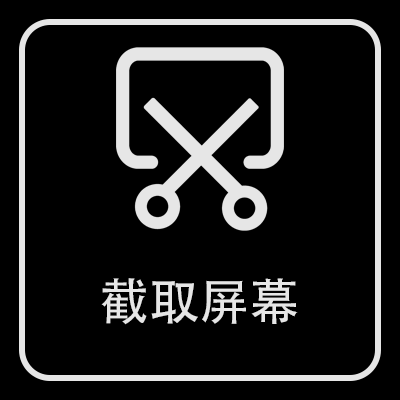
<style>
.page{position:relative;width:400px;height:400px;background:#000000}
.page>*{position:absolute;margin:0}
.t1{font:50px "AdobeHeitiStd-Regular";color:#e6e6e6}
</style>
<div class="page">
<p class="t1" style="left:101px;top:278px;width:197px;height:47px">截取屏幕</p>
</div>
